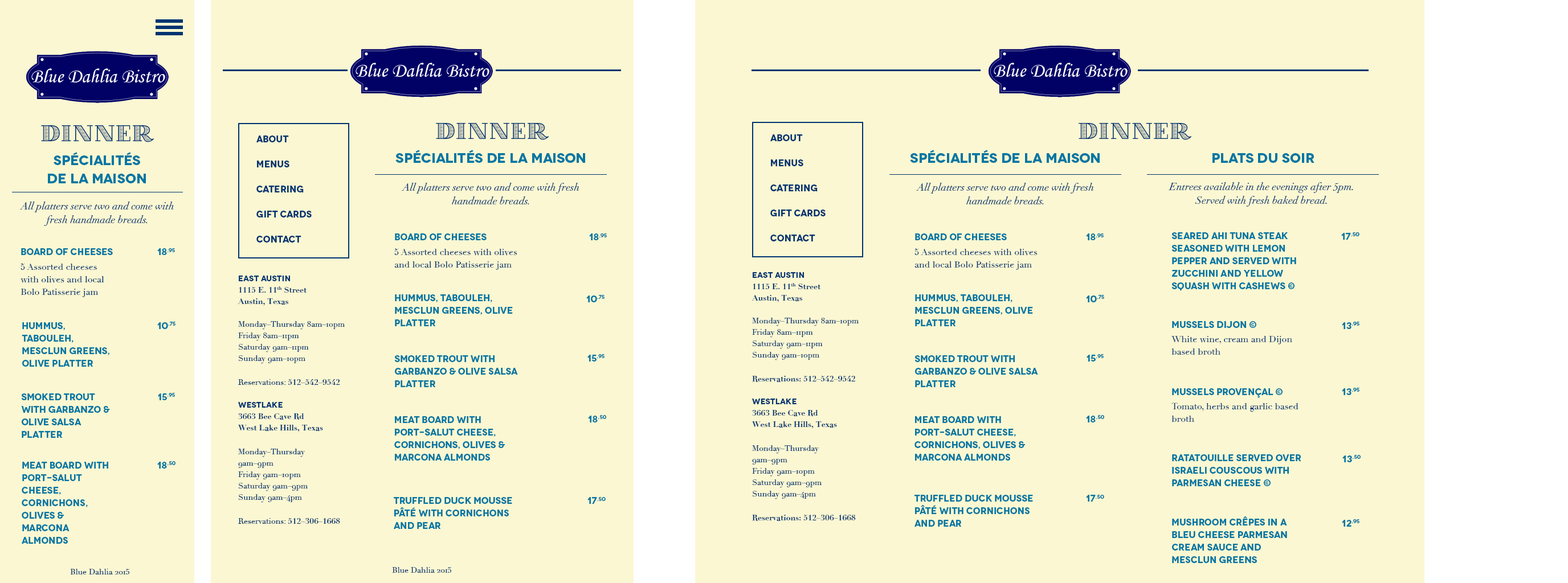
<style>
.page{position:relative;width:1568px;height:583px;background:#fbf7d2}
.page>*{position:absolute;margin:0}
.t1{font:22.8px "VillaDidot";color:#003471}
.t2{font:9.1px/12.5px "Novecentowide-Bold";color:#003471}
.t3{font:13.7px "Novecentowide-Bold";color:#0076a3}
.t4{font:13.7px/18.2px "Novecentowide-Bold";color:#0076a3}
.t5{font:10.3px/13.7px "Didot-Italic";color:#003471}
.t6{font:9.1px "Novecentowide-Bold";color:#0076a3}
.t7{font:9.1px/12.5px "Novecentowide-Bold";color:#0076a3}
.t8{font:9.1px/12.5px "Didot";color:#003471}
.t9{font:8px/11.4px "Didot";color:#003471}
.t10{font:8px/11.4px "Novecentowide-Bold";color:#003471}
.t11{font:8px/11.4px "Didot-Bold";color:#003471}
.t12{font:8px/12.5px "Didot-Bold";color:#003471}
.t13{font:8px "Didot";color:#003471}
</style>
<div class="page">
<p class="t1" style="left:41px;top:125px;width:113px;height:17px">DINNER</p>
<p class="t1" style="left:436px;top:123px;width:113px;height:17px">DINNER</p>
<p class="t1" style="left:1079px;top:123px;width:112px;height:17px">DINNER</p>
<p class="t2" style="left:256px;top:136px;width:56px;height:107px">About <br><br>Menus<br><br>Catering<br><br>Gift Cards<br><br>Contact</p>
<p class="t2" style="left:770px;top:134px;width:56px;height:108px">About <br><br>Menus<br><br>Catering<br><br>Gift Cards<br><br>Contact</p>
<p class="t3" style="left:395px;top:150px;width:190px;height:13px">Spécialités de la Maison</p>
<p class="t3" style="left:910px;top:150px;width:190px;height:13px">Spécialités de la Maison</p>
<p class="t4" style="left:48px;top:152px;width:98px;height:31px;text-align:center">Spécialités <br>de la Maison</p>
<p class="t3" style="left:1212px;top:153px;width:102px;height:10px">Plats du soir</p>
<p class="t5" style="left:401px;top:183px;width:178px;height:22px;text-align:center">All platters serve two and come with fresh handmade breads.</p>
<p class="t5" style="left:916px;top:183px;width:178px;height:22px;text-align:center">All platters serve two and come with fresh handmade breads.</p>
<p class="t5" style="left:1168px;top:182px;width:185px;height:25px;text-align:center">Entrees available in the evenings after 5pm.  <br>Served with fresh baked bread.</p>
<p class="t5" style="left:19px;top:202px;width:155px;height:24px;text-align:center">All platters serve two and come with fresh handmade breads.</p>
<p class="t6" style="left:395px;top:234px;width:92px;height:6px">Board of Cheeses</p>
<p class="t6" style="left:589px;top:234px;width:18px;height:6px">18.95</p>
<p class="t6" style="left:915px;top:234px;width:92px;height:6px">Board of Cheeses</p>
<p class="t6" style="left:1086px;top:234px;width:18px;height:6px">18.95</p>
<p class="t7" style="left:1171px;top:232px;width:125px;height:59px">Seared Ahi Tuna Steak seasoned with lemon pepper and served with<br>zucchini and yellow squash with cashews ©</p>
<p class="t6" style="left:1341px;top:232px;width:18px;height:8px">17.50</p>
<p class="t6" style="left:21px;top:248px;width:92px;height:7px">Board of Cheeses</p>
<p class="t6" style="left:157px;top:248px;width:18px;height:7px">18.95</p>
<p class="t8" style="left:394px;top:248px;width:123px;height:22px">5 Assorted cheeses with olives and local Bolo Patisserie jam</p>
<p class="t8" style="left:914px;top:248px;width:124px;height:22px">5 Assorted cheeses with olives and local Bolo Patisserie jam</p>
<p class="t8" style="left:21px;top:263px;width:83px;height:34px">5 Assorted cheeses with olives and local Bolo Patisserie jam</p>
<p class="t9" style="left:238px;top:276px;width:107px;height:248px"><span class="t10">East Austin<br></span><span class="t11">1115 E. 11th Street<br>Austin, Texas <br><br></span>Monday–Thursday 8am–10pm<br>Friday 8am–11pm<br>Saturday 9am–11pm<br>Sunday 9am–10pm<br><br>Reservations: <span class="t12">512–542–9542<br><br></span><span class="t10">Westlake<br></span><span class="t11">3663 Bee Cave Rd<br>West Lake Hills, Texas <br><br></span>Monday–Thursday<br>9am–9pm<br>Friday 9am–10pm<br>Saturday 9am–9pm<br>Sunday 9am–4pm<br><br>Reservations: <span class="t12">512–306–1668</span></p>
<p class="t9" style="left:752px;top:272px;width:107px;height:249px"><span class="t10">East Austin<br></span><span class="t11">1115 E. 11th Street<br>Austin, Texas <br><br></span>Monday–Thursday 8am–10pm<br>Friday 8am–11pm<br>Saturday 9am–11pm<br>Sunday 9am–10pm<br><br><span class="t11">Reservations: </span><span class="t12">512–542–9542<br><br></span><span class="t10">Westlake<br></span><span class="t11">3663 Bee Cave Rd<br>West Lake Hills, Texas <br><br></span>Monday–Thursday<br>9am–9pm<br>Friday 9am–10pm<br>Saturday 9am–9pm<br>Sunday 9am–4pm<br><br><span class="t11">Reservations: </span><span class="t12">512–306–1668</span></p>
<p class="t7" style="left:395px;top:295px;width:118px;height:31px">Hummus, Tabouleh, <br>Mesclun Greens, Olive Platter</p>
<p class="t6" style="left:586px;top:295px;width:19px;height:8px">10.75</p>
<p class="t7" style="left:915px;top:295px;width:118px;height:31px">Hummus, Tabouleh, <br>Mesclun Greens, Olive Platter</p>
<p class="t6" style="left:1086px;top:295px;width:18px;height:8px">10.75</p>
<p class="t7" style="left:22px;top:322px;width:87px;height:45px">Hummus, <br>Tabouleh, <br>Mesclun Greens, Olive Platter</p>
<p class="t6" style="left:157px;top:322px;width:18px;height:7px">10.75</p>
<p class="t6" style="left:1172px;top:321px;width:84px;height:7px">Mussels Dijon ©</p>
<p class="t6" style="left:1342px;top:322px;width:17px;height:7px">13.95</p>
<p class="t8" style="left:1171px;top:336px;width:121px;height:19px">White wine, cream and Dijon based broth</p>
<p class="t7" style="left:394px;top:356px;width:124px;height:31px">Smoked Trout with <br>Garbanzo &amp; Olive Salsa <br>Platter</p>
<p class="t6" style="left:587px;top:354px;width:18px;height:8px">15.95</p>
<p class="t7" style="left:914px;top:356px;width:124px;height:31px">Smoked Trout with <br>Garbanzo &amp; Olive Salsa <br>Platter</p>
<p class="t6" style="left:1087px;top:354px;width:17px;height:8px">15.95</p>
<p class="t6" style="left:1172px;top:389px;width:111px;height:9px">Mussels Provençal ©</p>
<p class="t6" style="left:1342px;top:388px;width:17px;height:7px">13.95</p>
<p class="t7" style="left:21px;top:394px;width:89px;height:44px">Smoked Trout with Garbanzo &amp; Olive Salsa <br>Platter</p>
<p class="t6" style="left:158px;top:393px;width:17px;height:8px">15.95</p>
<p class="t8" style="left:1171px;top:403px;width:127px;height:19px">Tomato, herbs and garlic based broth</p>
<p class="t7" style="left:394px;top:416px;width:111px;height:45px">Meat Board with Port-Salut cheese, <br>cornichons, olives &amp; <br>Marcona almonds</p>
<p class="t6" style="left:588px;top:415px;width:18px;height:8px">18.50</p>
<p class="t7" style="left:914px;top:416px;width:111px;height:45px">Meat Board with Port-Salut cheese, <br>cornichons, olives &amp; <br>Marcona almonds</p>
<p class="t6" style="left:1086px;top:415px;width:18px;height:8px">18.50</p>
<p class="t6" style="left:157px;top:462px;width:18px;height:7px">18.50</p>
<p class="t7" style="left:1172px;top:455px;width:129px;height:32px">Ratatouille served over Israeli Couscous with parmesan cheese ©</p>
<p class="t6" style="left:1342px;top:455px;width:19px;height:8px">13.50</p>
<p class="t7" style="left:22px;top:462px;width:86px;height:82px">Meat Board with Port-Salut cheese, <br>cornichons, olives &amp; <br>Marcona <br>almonds</p>
<p class="t7" style="left:394px;top:497px;width:118px;height:32px">Truffled Duck Mousse Pâté with cornichons and pear</p>
<p class="t6" style="left:587px;top:497px;width:19px;height:7px">17.50</p>
<p class="t7" style="left:914px;top:495px;width:119px;height:32px">Truffled Duck Mousse Pâté with cornichons and pear</p>
<p class="t6" style="left:1086px;top:495px;width:18px;height:7px">17.50</p>
<p class="t7" style="left:1172px;top:516px;width:115px;height:48px">Mushroom Crêpes in a bleu cheese parmesan cream sauce and <br>mesclun greens</p>
<p class="t6" style="left:1342px;top:520px;width:17px;height:7px">12.95</p>
<p class="t13" style="left:70px;top:569px;width:59px;height:6px">Blue Dahlia 2015</p>
<p class="t13" style="left:392px;top:567px;width:59px;height:6px">Blue Dahlia 2015</p>
</div>
